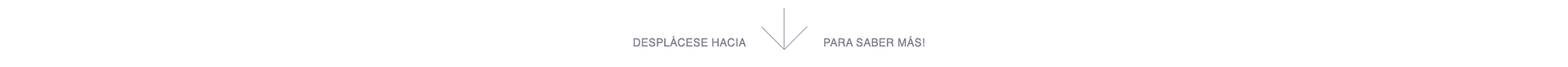
<style>
.page{position:relative;width:1568px;height:67px;background:#ffffff}
.page>*{position:absolute;margin:0}
.t1{font:11px "Helvetica";letter-spacing:0.02em;color:#80808e}
</style>
<div class="page">
<p class="t1" style="left:633px;top:35px;width:113px;height:12px">DESPLÁCESE HACIA</p>
<p class="t1" style="left:824px;top:35px;width:100px;height:12px">PARA SABER MÁS!</p>
</div>
